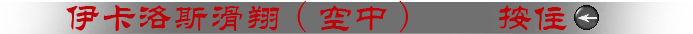
<style>
.page{position:relative;width:693px;height:34px;background:#707070}
.page>*{position:absolute;margin:0}
.t1{font:36px "STLiti";color:#ba060b}
.t2{font:36px "FangSong";color:#ba060b}
</style>
<div class="page">
<p class="t1" style="left:66px;top:0px;width:501px;height:33px">伊卡洛斯滑翔<span class="t2">(</span>空中<span class="t2">)    </span>按住</p>
</div>
